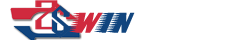
<style>
.page{position:relative;width:228px;height:40px;background:#ffffff}
.page>*{position:absolute;margin:0}
.t1{font:35.5px "Barbatrick";letter-spacing:0.1em;color:#11457e}
.t2{font:35.5px "Barbatrick";letter-spacing:0.1em;color:#d02a3e}
</style>
<div class="page">
<p class="t1" style="left:69px;top:12px;width:66px;height:21px"><span class="t2">W</span>IN</p>
</div>
